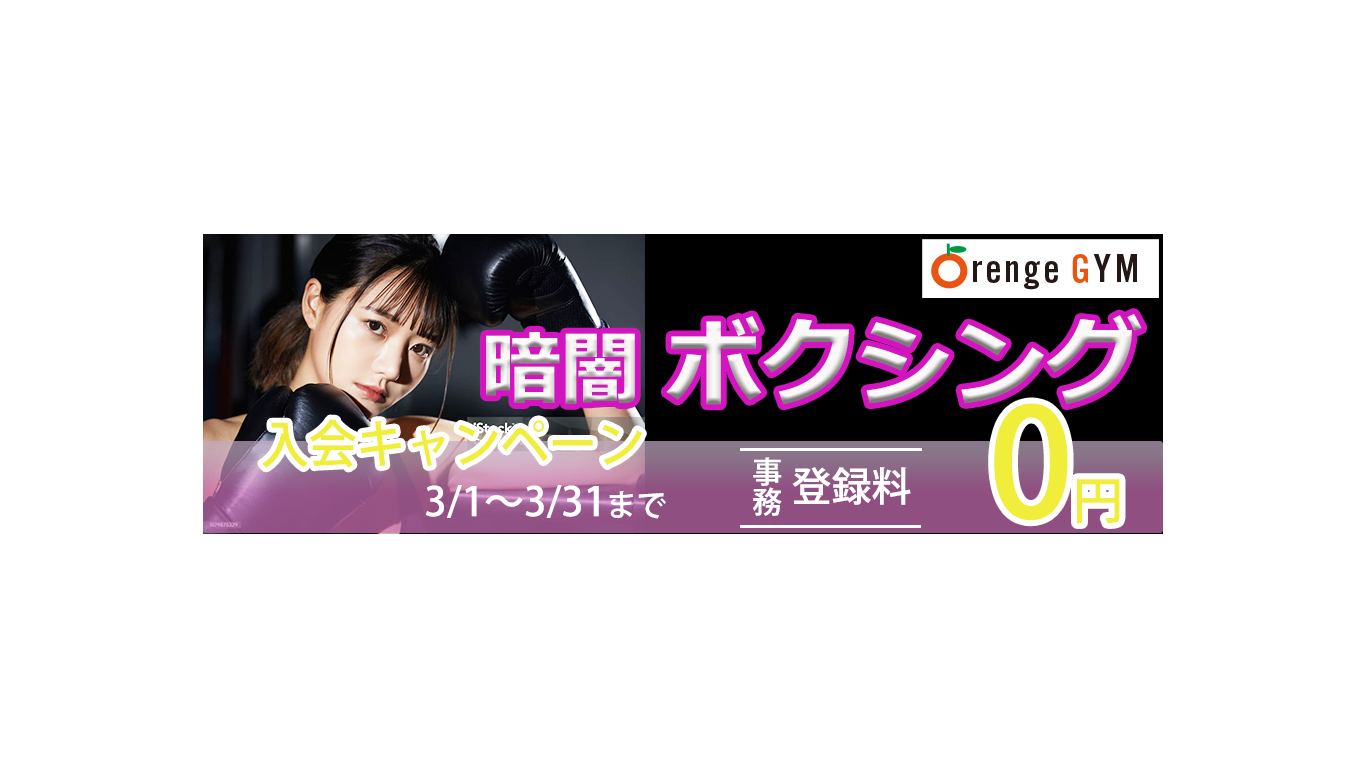
<style>
.page{position:relative;width:1366px;height:768px;background:#ffffff}
.page>*{position:absolute;margin:0}
.t1{font:95.7px "Meiryo-BoldItalic";color:#f9f8f6}
.t2{font:80px "Meiryo-BoldItalic";color:#f9f8f6}
.t3{font:150px "KozGoPro-Medium";color:#f0ee3a}
.t4{font:50px "KozGoPro-Medium";color:#f0ee3a}
.t5{font:50.8px "KozGoPro-Medium";color:#f0ee3a;scale:0.95 1}
.t6{font:30px/150px "KozGoPro-Medium";color:#ffffff}
.t7{font:40px "KozGoPro-Medium";color:#ffffff}
.t8{font:30px "KozGoPro-Medium";color:#ffffff}
</style>
<div class="page">
<p class="t1" style="left:486px;top:314px;width:656px;height:91px"><span class="t2">暗闇 </span>ボクシング</p>
<p class="t3" style="left:994px;top:403px;width:126px;height:120px">0<span class="t4">円</span></p>
<p class="t5" style="left:262px;top:419px;width:380px;height:49px">入会キャンペーン</p>
<p class="t6" style="left:753px;top:457px;width:29px;height:59px">事務</p>
<p class="t7" style="left:792px;top:467px;width:119px;height:38px">登録料</p>
<p class="t7" style="left:425px;top:485px;width:241px;height:34px">3/1～3/31<span class="t8">まで</span></p>
</div>
